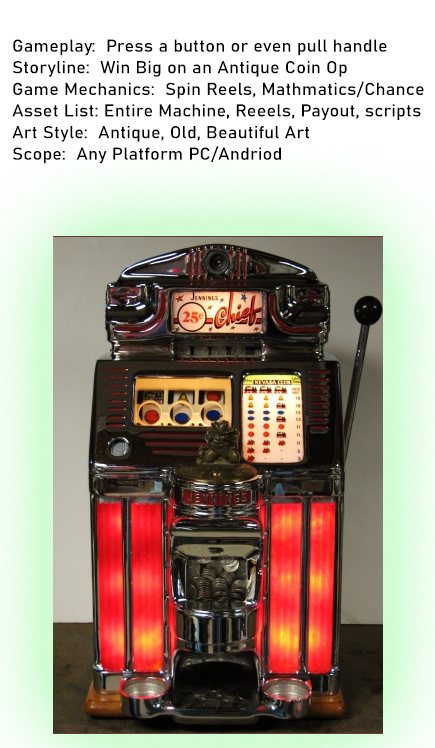
<style>
.page{position:relative;width:435px;height:748px}
.page>*{position:absolute;margin:0}
.t1{font:17.1px "Bahnschrift";letter-spacing:0.01em;color:#000000;scale:1.05 1}
</style>
<div class="page">
<p class="t1" style="left:12px;top:39px;width:412px;height:125px">Gameplay:  Press a button or even pull handle<br>Storyline:  Win Big on an Antique Coin Op<br>Game Mechanics:  Spin Reels, Mathmatics/Chance<br>Asset List: Entire Machine, Reeels, Payout, scripts<br>Art Style:  Antique, Old, Beautiful Art<br>Scope:  Any Platform PC/Andriod</p>
</div>
